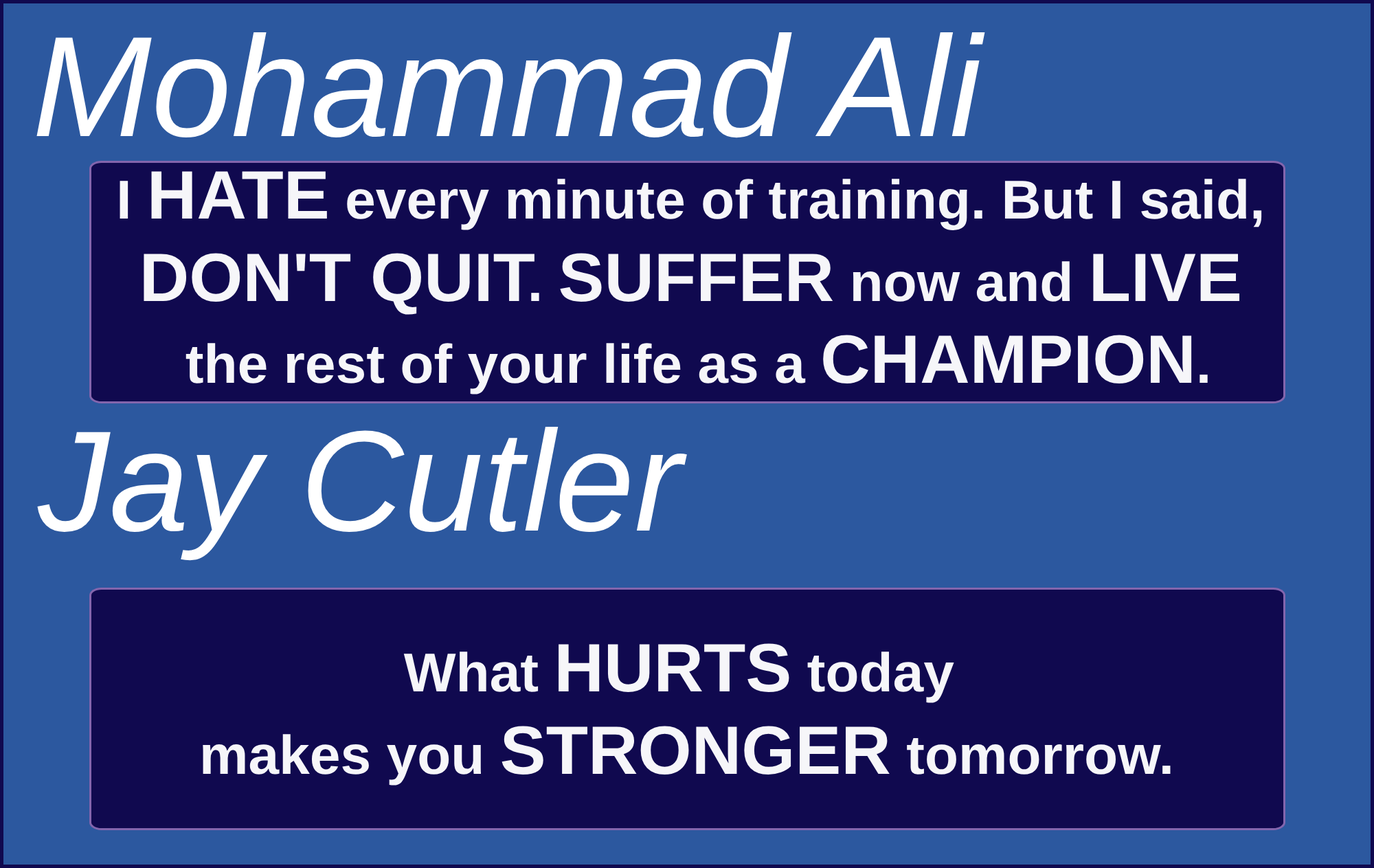
<style>
.page{position:relative;width:1374px;height:868px;background:#2c589f}
.page>*{position:absolute;margin:0}
.t1{font:143.1px "Arial-ItalicMT";color:#ffffff}
.t2{font:54.7px "Arial-BoldMT";color:#f6f6f9}
.t3{font:68.4px "Arial-BoldMT";color:#f6f6f9}
</style>
<div class="page">
<p class="t1" style="left:36px;top:32px;width:949px;height:106px">Mohammad Ali</p>
<p class="t2" style="left:120px;top:171px;width:1142px;height:223px;text-align:center">I <span class="t3">HATE </span>every minute of training. But I said, <br><span class="t3">DON'T QUIT</span>. <span class="t3">SUFFER </span>now and <span class="t3">LIVE <br></span>the rest of your life as a <span class="t3">CHAMPION</span>.</p>
<p class="t1" style="left:37px;top:427px;width:650px;height:134px">Jay Cutler</p>
<p class="t2" style="left:203px;top:643px;width:968px;height:142px;text-align:center">What <span class="t3">HURTS </span>today <br>makes you <span class="t3">STRONGER </span>tomorrow.</p>
</div>
